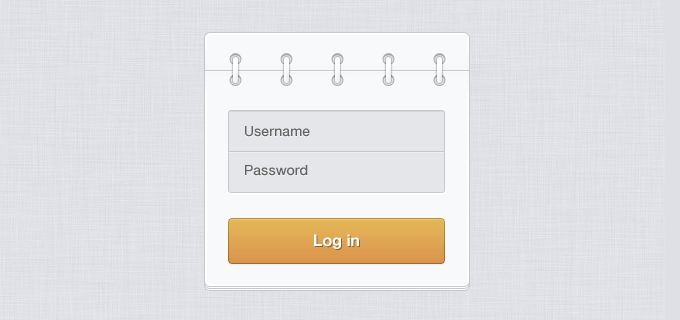
<style>
.page{position:relative;width:680px;height:320px}
.page>*{position:absolute;margin:0}
.t1{font:14px "HelveticaNeue-Medium";color:#636363}
.t2{font:16px "HelveticaNeue-Bold";color:#ffffff}
</style>
<div class="page">
<p class="t1" style="left:245px;top:126px;width:65px;height:11px">Username</p>
<p class="t1" style="left:245px;top:165px;width:63px;height:11px">Password</p>
<p class="t2" style="left:314px;top:234px;width:45px;height:15px">Log in</p>
</div>
